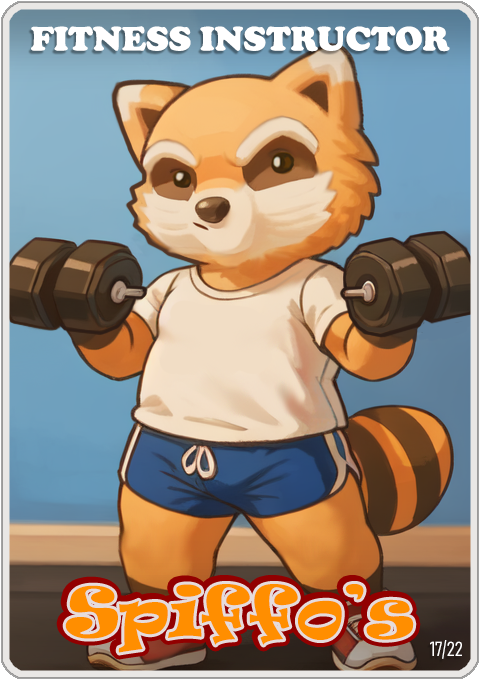
<style>
.page{position:relative;width:480px;height:680px}
.page>*{position:absolute;margin:0}
.t1{font:35px "CooperBlack";color:#ffffff}
.t2{font:65px "Ravie";color:#ff8e00}
.t3{font:20px "Bahnschrift-LightCondensed";color:#ffffff}
</style>
<div class="page">
<p class="t1" style="left:31px;top:26px;width:419px;height:26px">FITNESS INSTRUCTOR</p>
<p class="t2" style="left:65px;top:584px;width:349px;height:69px">Spiffo’s</p>
<p class="t3" style="left:430px;top:640px;width:32px;height:19px">17/22</p>
</div>
